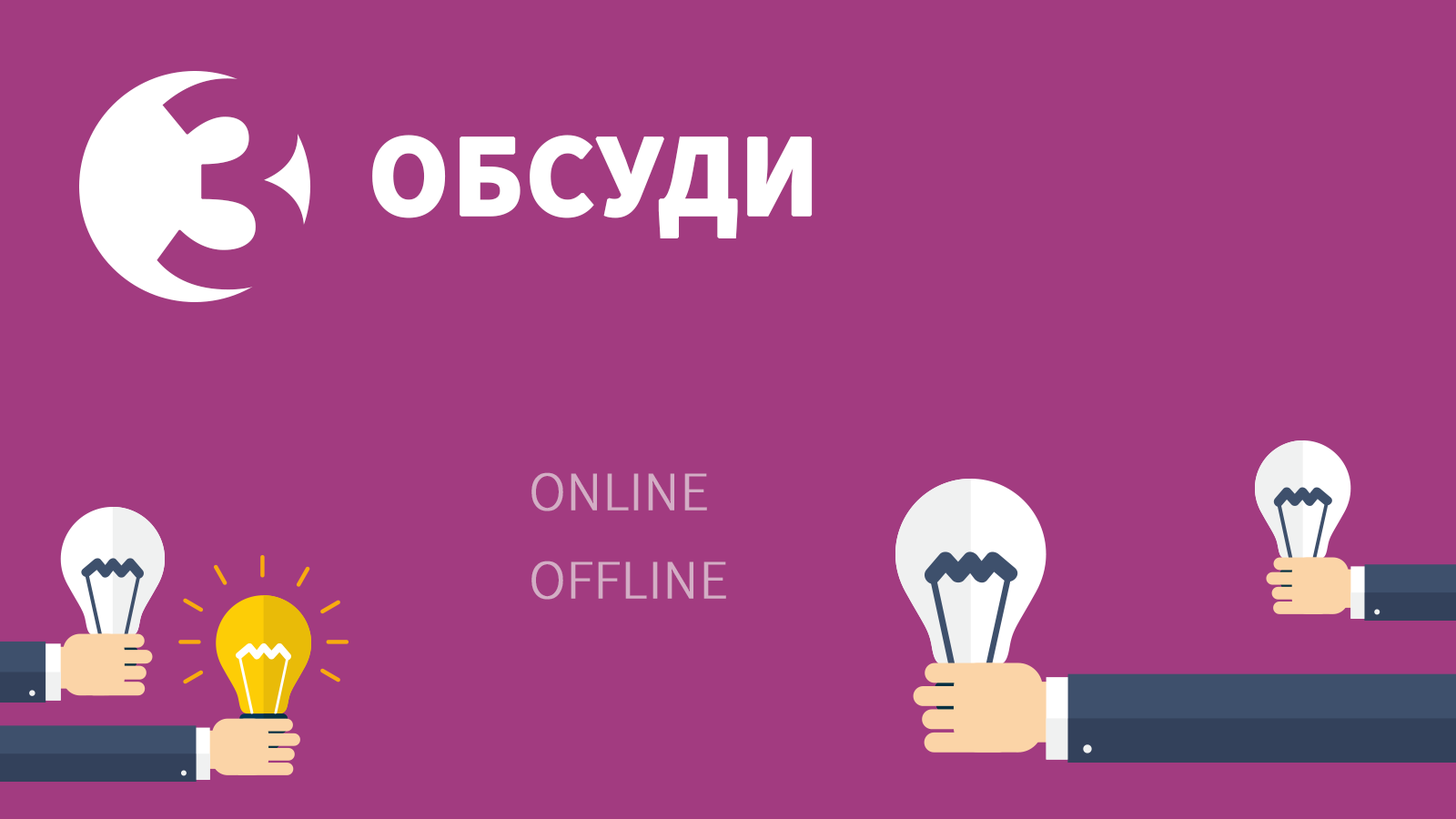
<style>
.page{position:relative;width:1456px;height:819px;background:#a23b80}
.page>*{position:absolute;margin:0}
.t1{font:317.8px "SourceSansPro-Bold";color:#a23b80;text-transform:uppercase;font-weight:bold}
.t2{font:117.4px "SourceSansPro-Bold";color:#ffffff;text-transform:uppercase;font-weight:bold}
.t3{font:54.6px "SourceSansPro-Light";color:#d3adc5;text-transform:uppercase;font-weight:bold}
</style>
<div class="page">
<p class="t1" style="left:157px;top:78px;width:148px;height:212px">3</p>
<p class="t2" style="left:372px;top:135px;width:441px;height:103px">обсуди</p>
<p class="t3" style="left:531px;top:472px;width:176px;height:39px">online</p>
<p class="t3" style="left:531px;top:561px;width:195px;height:39px">offline</p>
</div>
